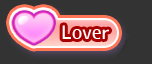
<style>
.page{position:relative;width:152px;height:64px;background:#333333}
.page>*{position:absolute;margin:0}
.t1{font:18px "JK-Gothic-M";color:#ffffff}
</style>
<div class="page">
<p class="t1" style="left:62px;top:25px;width:48px;height:15px">Lover</p>
</div>
